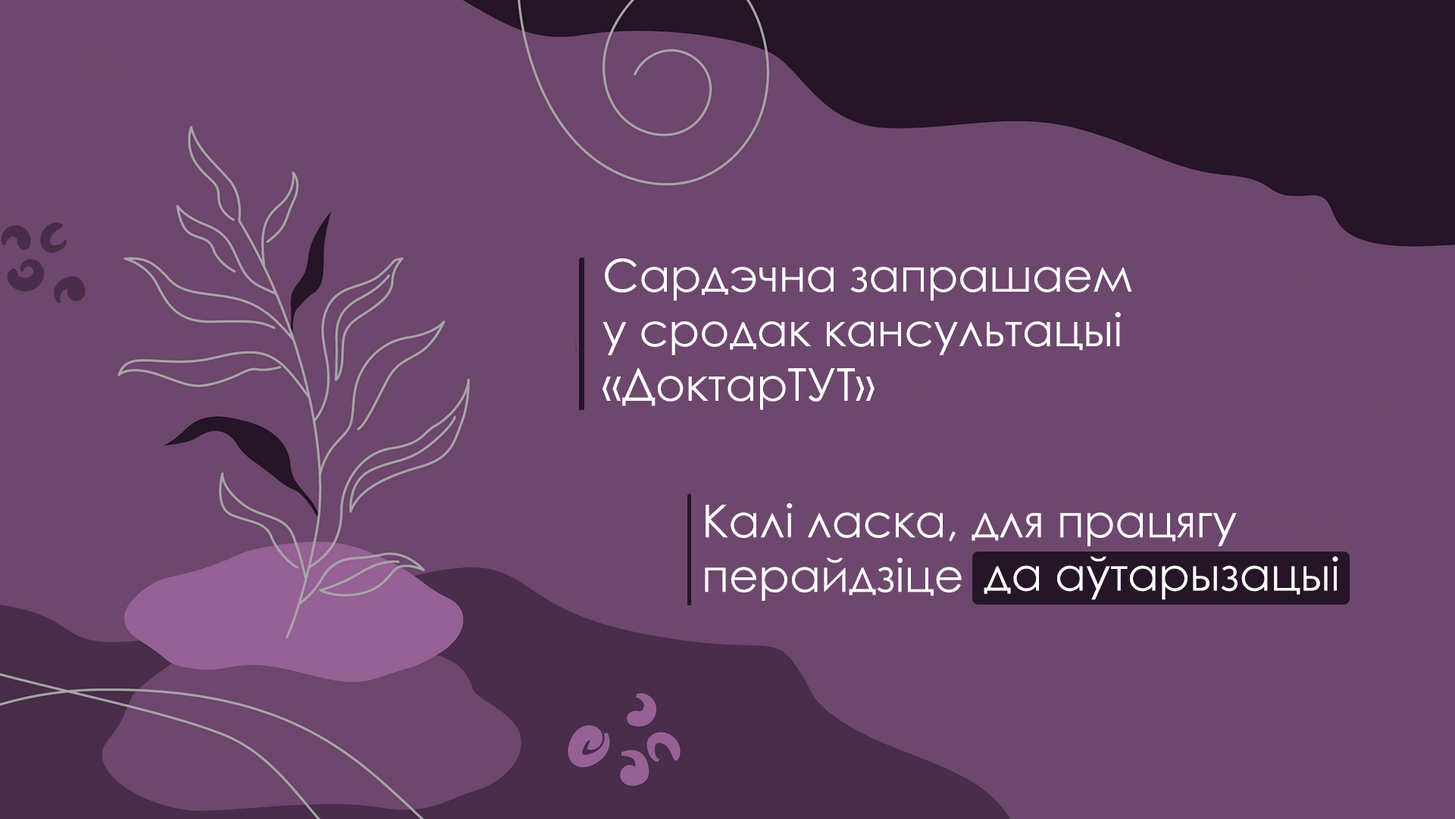
<style>
.page{position:relative;width:1455px;height:819px;background:#6d476d}
.page>*{position:absolute;margin:0}
.t1{font:45.5px "CenturyGothic";color:#ffffff}
</style>
<div class="page">
<p class="t1" style="left:603px;top:258px;width:529px;height:152px">Сардэчна запрашаем<br>у сродак кансультацыі<br>«ДоктарТУТ»</p>
<p class="t1" style="left:705px;top:503px;width:532px;height:98px">Калі ласка, для працягу<br>перайдзіце</p>
<p class="t1" style="left:984px;top:556px;width:355px;height:44px">да аўтарызацыі</p>
</div>
